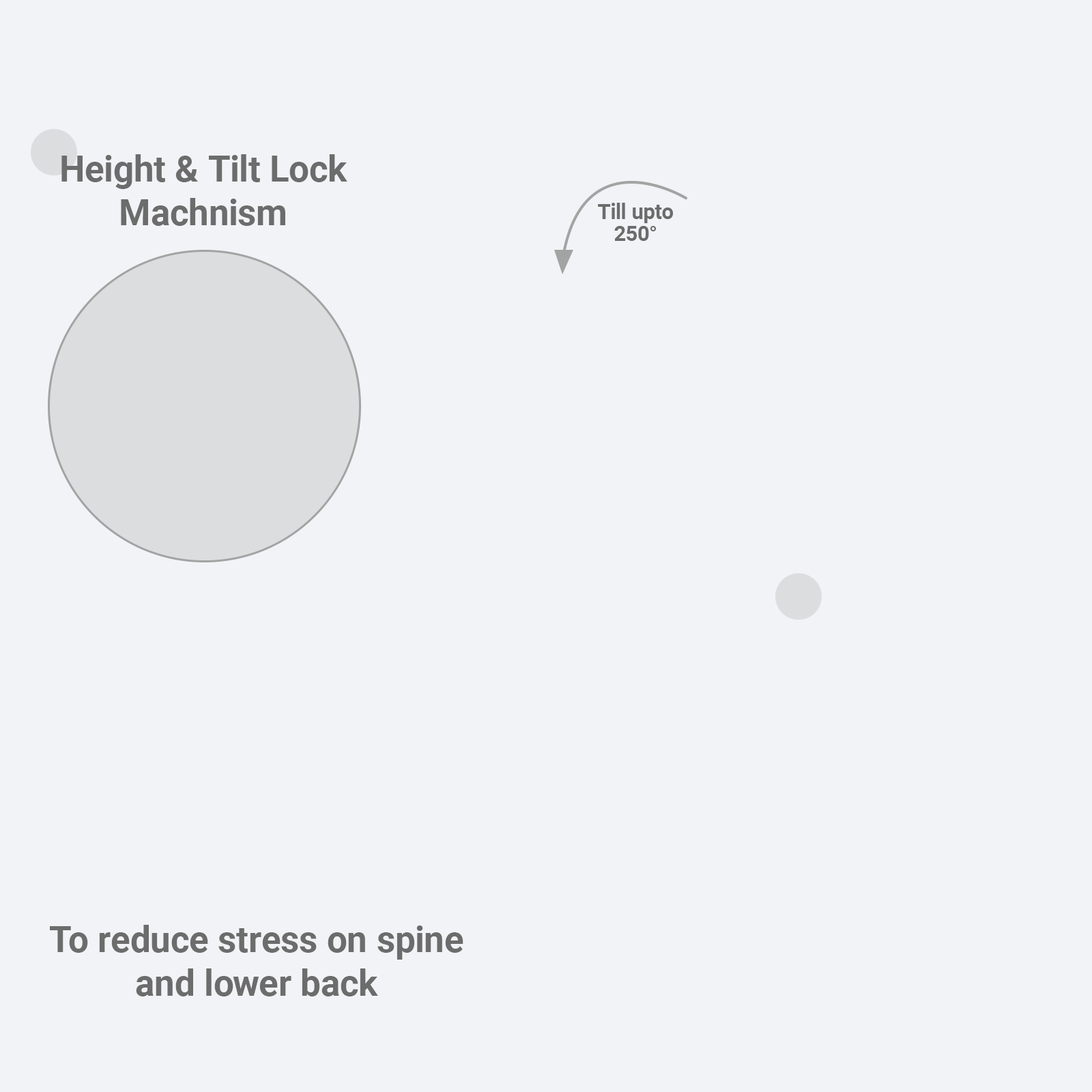
<style>
.page{position:relative;width:1092px;height:1092px;background:#f2f3f6}
.page>*{position:absolute;margin:0}
.t1{font:36.4px "Roboto-Bold";color:#6c6c6c}
.t2{font:21px/21.5px "Roboto-Bold";color:#6c6c6c}
</style>
<div class="page">
<p class="t1" style="left:61px;top:154px;width:286px;height:72px;text-align:center">Height &amp; Tilt Lock<br>Machnism</p>
<p class="t2" style="left:598px;top:203px;width:75px;height:38px;text-align:center">Till upto<br>250°</p>
<p class="t1" style="left:50px;top:925px;width:413px;height:71px;text-align:center">To reduce stress on spine<br>and lower back</p>
</div>
